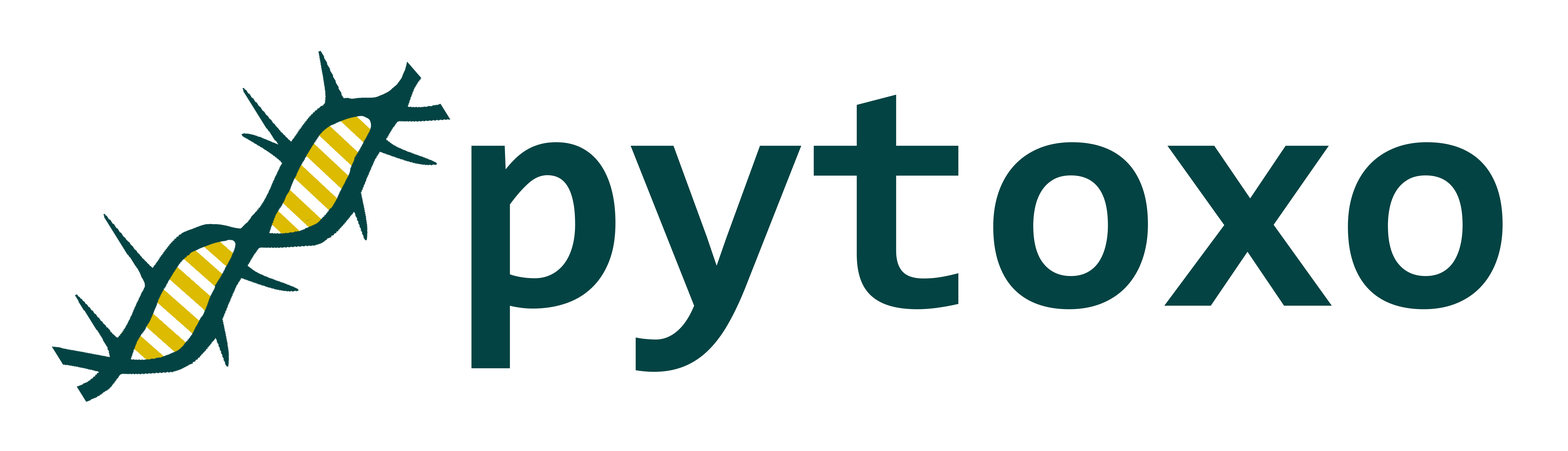
<style>
.page{position:relative;width:1568px;height:451px;background:#ffffff}
.page>*{position:absolute;margin:0}
.t1{font:322.7px "Consolas-Bold";color:#044343}
</style>
<div class="page">
<p class="t1" style="left:471px;top:94px;width:1032px;height:278px">pytoxo</p>
</div>
